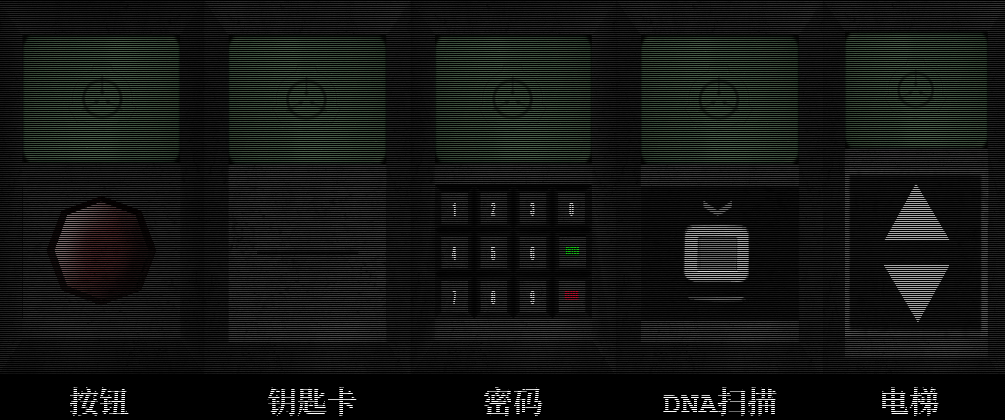
<style>
.page{position:relative;width:1005px;height:420px;background:#000000}
.page>*{position:absolute;margin:0}
.t1{font:30px "ContainmentBreach-Bold"}
</style>
<div class="page">
<p class="t1" style="left:69px;top:387px;width:870px;height:29px">按钮     钥匙卡    密码    DNA扫描    电梯</p>
</div>
